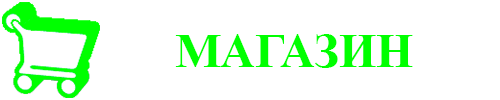
<style>
.page{position:relative;width:500px;height:100px;background:#ffffff}
.page>*{position:absolute;margin:0}
.t1{font:48px "TimesNewRomanPS-BoldMT";color:#00ff00}
</style>
<div class="page">
<p class="t1" style="left:175px;top:34px;width:238px;height:34px">МАГАЗИН</p>
</div>
